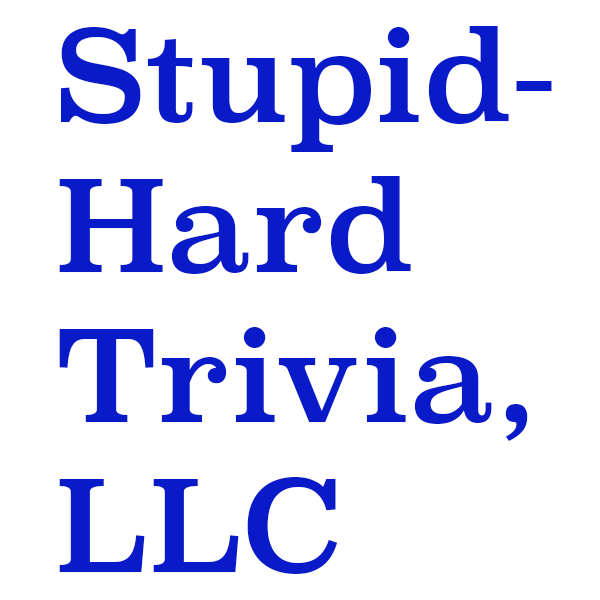
<style>
.page{position:relative;width:600px;height:600px;background:#ffffff}
.page>*{position:absolute;margin:0}
.t1{font:125px "Superclarendon-Regular";color:#091bc8}
</style>
<div class="page">
<p class="t1" style="left:59px;top:26px;width:493px;height:548px">Stupid-<br>Hard<br>Trivia,<br>LLC</p>
</div>
